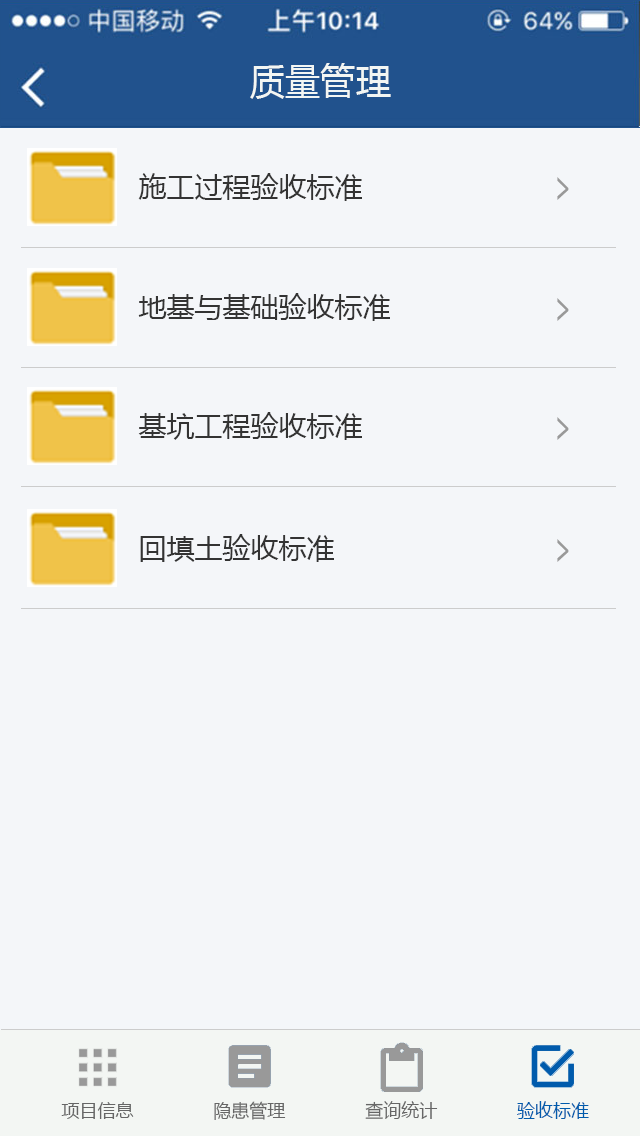
<style>
.page{position:relative;width:640px;height:1136px;background:#f4f6f9}
.page>*{position:absolute;margin:0}
.t1{font:36px "MicrosoftYaHei";color:#f3f6f3}
.t2{font:28px "MicrosoftYaHei";color:#333333}
.t3{font:44.9px "MicrosoftYaHei";color:#999999;scale:0.54 1}
.t4{font:18px "MicrosoftYaHei";color:#666666}
.t5{font:18px "MicrosoftYaHei";color:#005bac}
</style>
<div class="page">
<p class="t1" style="left:250px;top:63px;width:141px;height:36px">质量管理</p>
<p class="t2" style="left:138px;top:173px;width:224px;height:28px">施工过程验收标准</p>
<p class="t3" style="left:557px;top:177px;width:12px;height:23px">&gt;</p>
<p class="t2" style="left:138px;top:293px;width:252px;height:28px">地基与基础验收标准</p>
<p class="t3" style="left:557px;top:298px;width:12px;height:23px">&gt;</p>
<p class="t2" style="left:138px;top:412px;width:224px;height:28px">基坑工程验收标准</p>
<p class="t3" style="left:557px;top:417px;width:12px;height:23px">&gt;</p>
<p class="t2" style="left:140px;top:534px;width:194px;height:28px">回填土验收标准</p>
<p class="t3" style="left:557px;top:539px;width:12px;height:23px">&gt;</p>
<p class="t4" style="left:61px;top:1101px;width:528px;height:19px">项目信息               隐患管理               查询统计              <span class="t5"> 验收标准</span></p>
</div>
